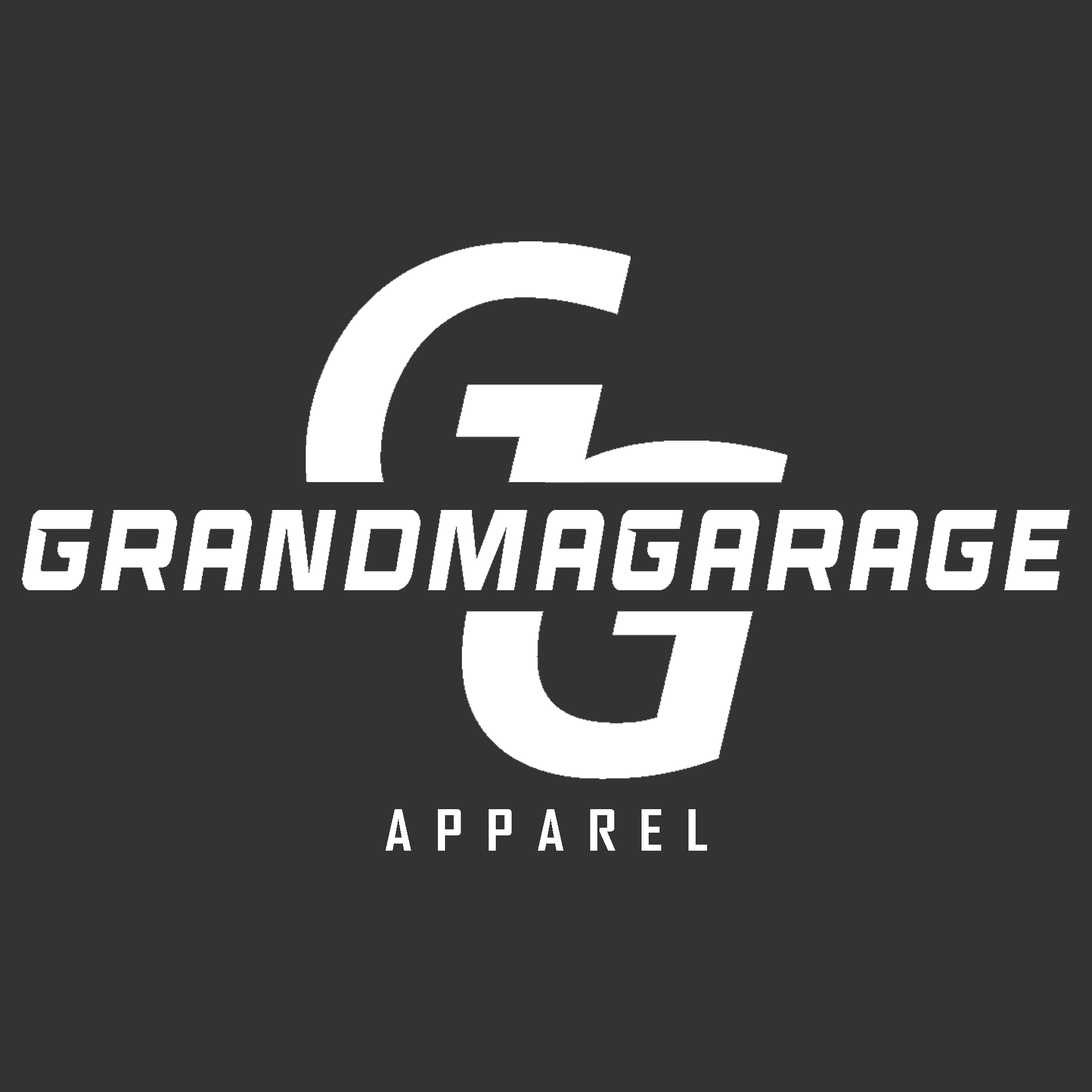
<style>
.page{position:relative;width:1092px;height:1092px;background:#333333}
.page>*{position:absolute;margin:0}
.t1{font:114.7px "RaceSportRegular";letter-spacing:0.075em;color:#ffffff;scale:0.7 1}
.t2{font:54.4px "AgencyFB-Bold";letter-spacing:0.075em;color:#ffffff;scale:1.16 1}
</style>
<div class="page">
<p class="t1" style="left:22px;top:510px;width:1048px;height:80px">GrandmaGarage</p>
<p class="t2" style="left:385px;top:809px;width:322px;height:42px">A P P A R E L</p>
</div>
